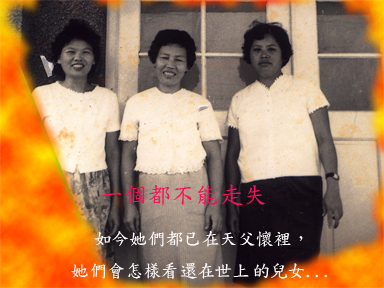
<style>
.page{position:relative;width:384px;height:288px}
.page>*{position:absolute;margin:0}
.t1{font:24px "DFKaiShu-SB-Estd-BF";color:#f41358}
.t2{font:18px "DFKaiShu-SB-Estd-BF";color:#faf7f8}
</style>
<div class="page">
<p class="t1" style="left:102px;top:184px;width:164px;height:22px">一個都不能走失</p>
<p class="t2" style="left:71px;top:231px;width:257px;height:48px;text-align:center">如今她們都已在天父懷裡，<br>她們會怎樣看還在世上的兒女...</p>
</div>
